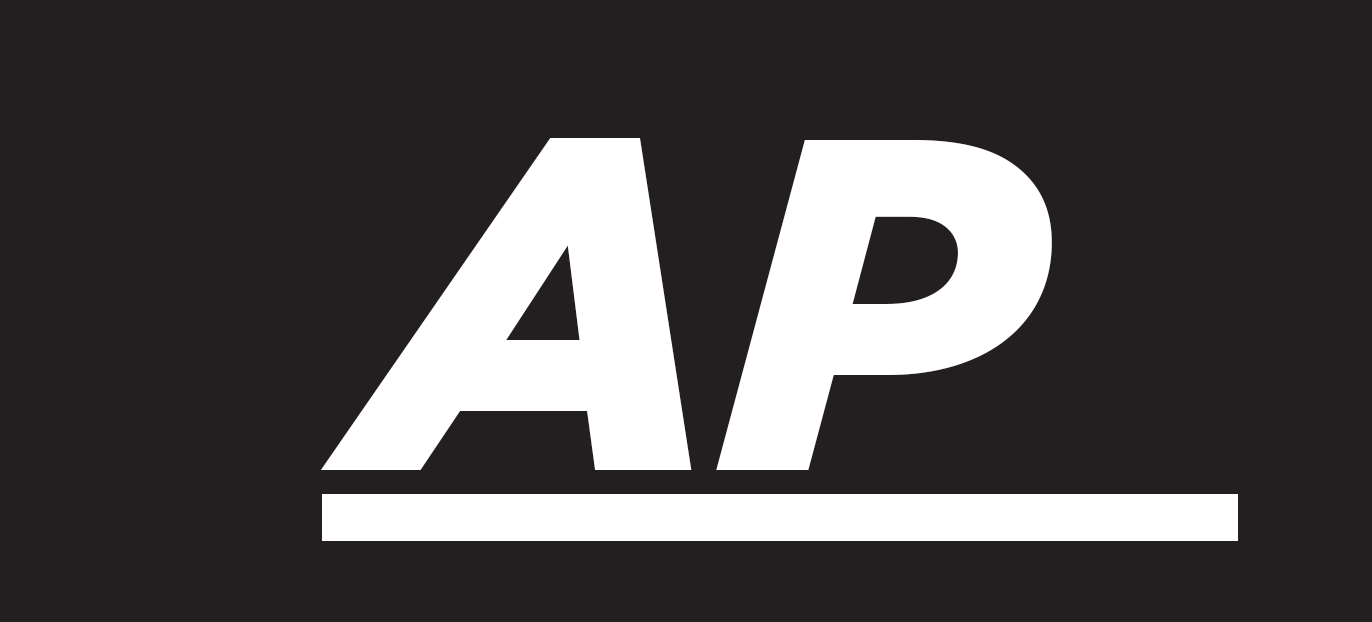
<style>
.page{position:relative;width:1372px;height:622px;background:#231f20}
.page>*{position:absolute;margin:0}
.t1{font:471px "Gotham-BlackItalic";color:#ffffff}
</style>
<div class="page">
<p class="t1" style="left:321px;top:138px;width:731px;height:332px">AP</p>
</div>
